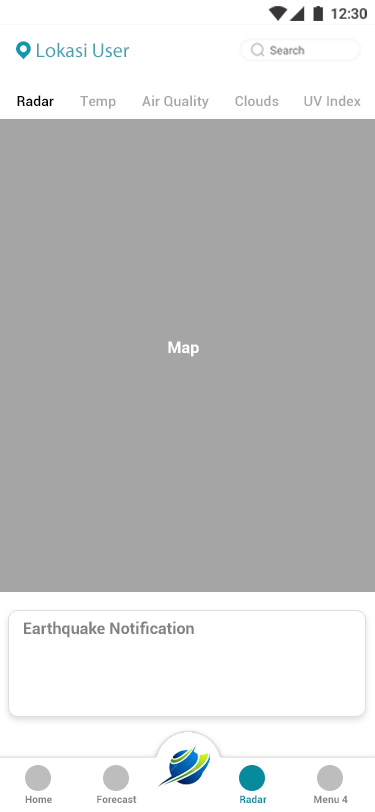
<style>
.page{position:relative;width:375px;height:812px;background:#a5a5a5}
.page>*{position:absolute;margin:0}
.t1{font:20px "MyriadPro-Regular";color:#4aa1ae}
.t2{font:14px "Roboto-Medium";letter-spacing:0.01em;color:#000000}
.t3{font:14px "Roboto-Medium";letter-spacing:0.01em;color:#a7a7a7}
.t4{font:16px "Roboto-Bold";letter-spacing:0.005em;color:#ffffff}
.t5{font:16px "Roboto-Bold";letter-spacing:0.005em;color:#828282}
.t6{font:10px "Roboto-Bold";letter-spacing:0.005em;color:#828282}
.t7{font:10px "Roboto-Bold";letter-spacing:0.005em;color:#088a9d}
</style>
<div class="page">
<p class="t1" style="left:37px;top:42px;width:92px;height:16px">Lokasi User</p>
<p class="t2" style="left:17px;top:95px;width:37px;height:12px">Radar</p>
<p class="t3" style="left:80px;top:96px;width:36px;height:13px">Temp</p>
<p class="t3" style="left:142px;top:95px;width:67px;height:14px">Air Quality</p>
<p class="t3" style="left:235px;top:95px;width:44px;height:12px">Clouds</p>
<p class="t3" style="left:304px;top:95px;width:57px;height:11px">UV Index</p>
<p class="t4" style="left:168px;top:341px;width:31px;height:16px">Map</p>
<p class="t5" style="left:24px;top:621px;width:170px;height:17px">Earthquake Notification</p>
<p class="t6" style="left:25px;top:795px;width:27px;height:8px">Home</p>
<p class="t6" style="left:97px;top:795px;width:40px;height:8px">Forecast</p>
<p class="t7" style="left:240px;top:795px;width:27px;height:8px">Radar</p>
<p class="t6" style="left:314px;top:795px;width:34px;height:8px">Menu 4</p>
</div>
